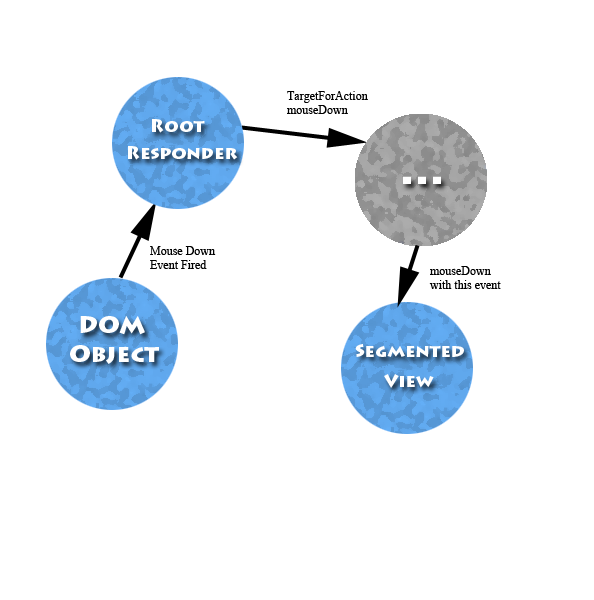
<style>
.page{position:relative;width:594px;height:600px;background:#ffffff}
.page>*{position:absolute;margin:0}
.t1{font:12px "TimesNewRomanPSMT";color:#000000}
.t2{font:18px "LithosPro-Black";color:#ffffff}
.t3{font:48px "LithosPro-Black";color:#ffffff}
.t4{font:24px "LithosPro-Black";color:#ffffff}
</style>
<div class="page">
<p class="t1" style="left:287px;top:91px;width:81px;height:23px">TargetForAction<br>mouseDown</p>
<p class="t2" style="left:152px;top:119px;width:53px;height:14px">Root</p>
<p class="t2" style="left:128px;top:146px;width:110px;height:14px">Responder</p>
<p class="t3" style="left:403px;top:176px;width:38px;height:8px">...</p>
<p class="t1" style="left:150px;top:246px;width:66px;height:23px">Mouse Down<br>Event Fired</p>
<p class="t1" style="left:429px;top:266px;width:72px;height:23px">mouseDown<br>with this event</p>
<p class="t4" style="left:80px;top:316px;width:65px;height:19px">DOM</p>
<p class="t4" style="left:70px;top:345px;width:89px;height:19px">Object</p>
<p class="t2" style="left:355px;top:344px;width:109px;height:13px">Segmented</p>
<p class="t2" style="left:384px;top:374px;width:50px;height:14px">View</p>
</div>
